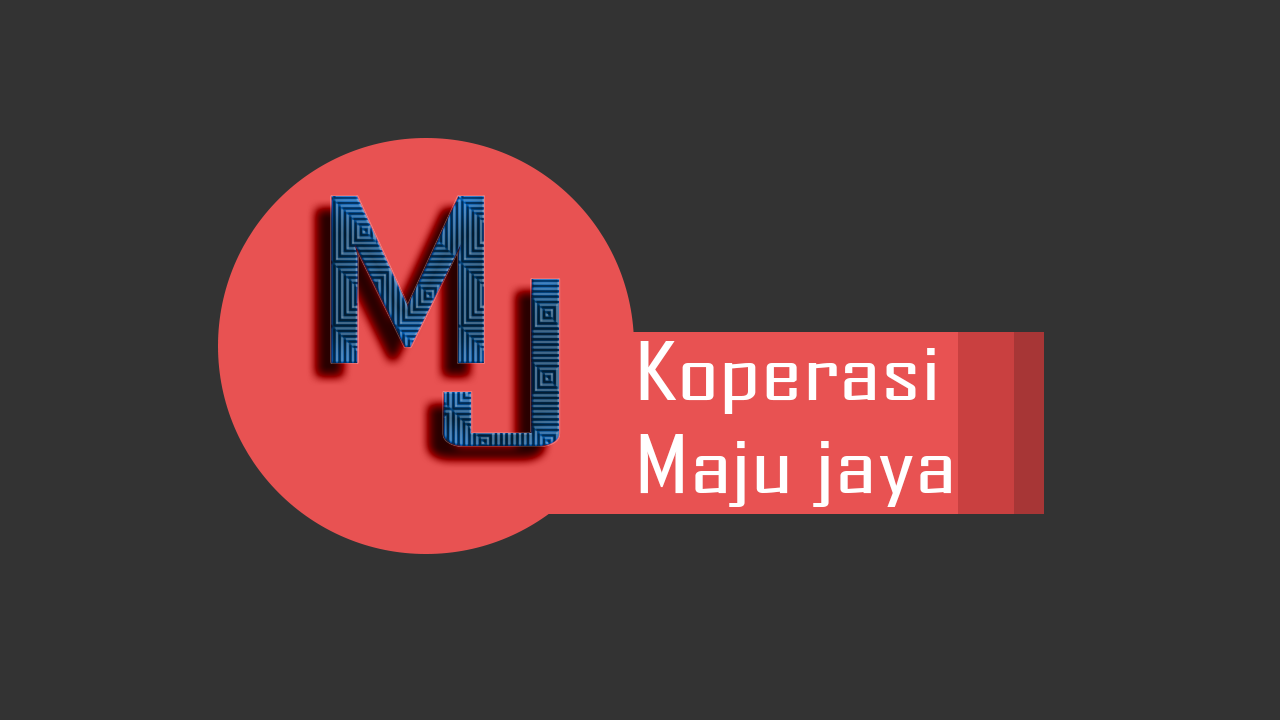
<style>
.page{position:relative;width:1280px;height:720px;background:#333333}
.page>*{position:absolute;margin:0}
.t1{font:219.2px "AgencyFB-Reg";scale:1.84 1}
.t2{font:77.3px "AgencyFB-Reg";color:#ffffff;scale:1.44 1}
</style>
<div class="page">
<p class="t1" style="left:331px;top:196px;width:153px;height:167px">M</p>
<p class="t1" style="left:443px;top:279px;width:117px;height:167px">J</p>
<p class="t2" style="left:640px;top:341px;width:311px;height:166px">Koperasi<br>Maju jaya</p>
</div>
